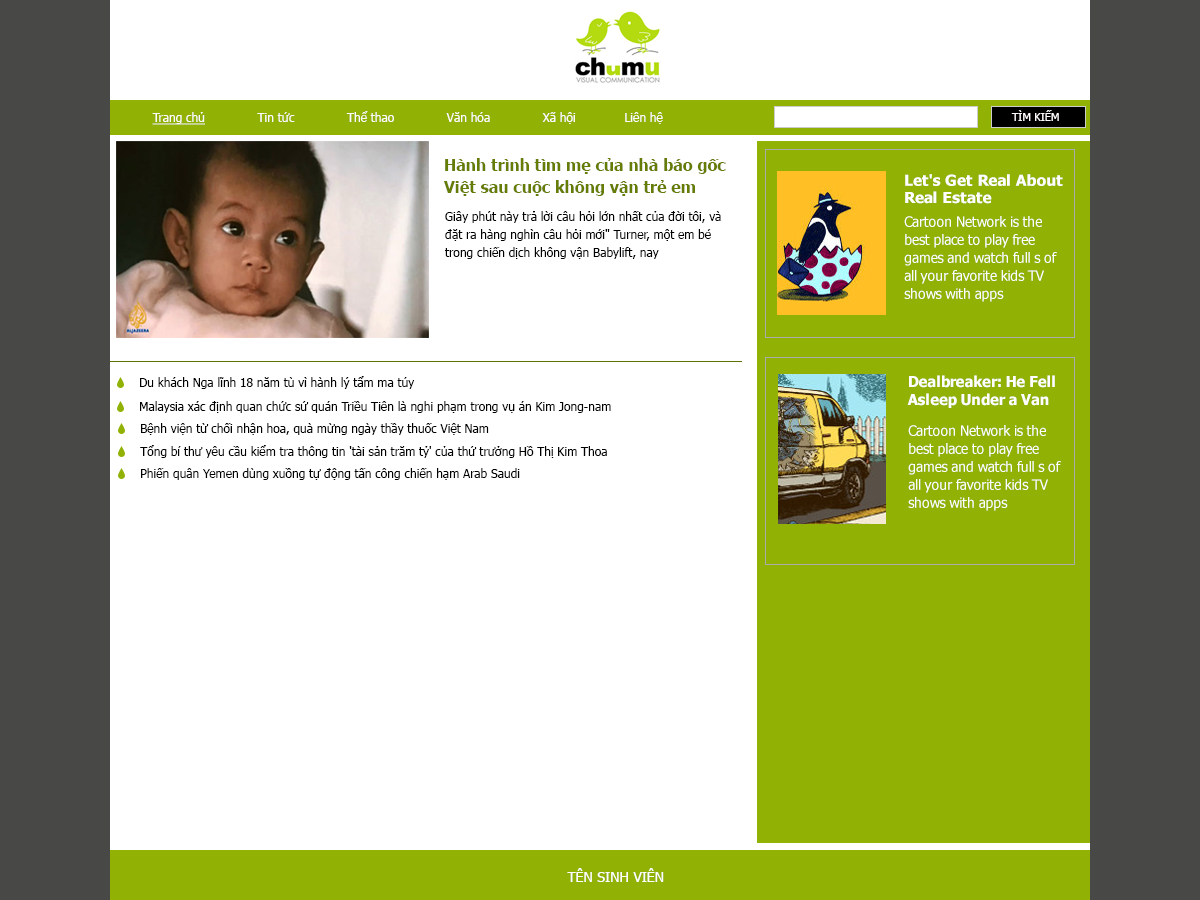
<style>
.page{position:relative;width:1200px;height:900px;background:#ffffff}
.page>*{position:absolute;margin:0}
.t1{font:12px "Tahoma";color:#fefbfb}
.t2{font:12px "Tahoma";color:#fefbfb;text-decoration:underline}
.t3{font:11px "Tahoma";color:#fefbfb}
.t4{font:16px/22px "Tahoma-Bold";color:#657c05}
.t5{font:15px/17.3px "Tahoma-Bold";letter-spacing:-0.01em;color:#ffffff;scale:1.04 1}
.t6{font:12px/18px "Tahoma";color:#000000}
.t7{font:14px/18px "Tahoma";letter-spacing:-0.01em;color:#ffffff}
.t8{font:12px "Tahoma";color:#000000}
.t9{font:15px/18.1px "Tahoma-Bold";letter-spacing:-0.01em;color:#ffffff}
.t10{font:14px "Tahoma";color:#ffffff}
</style>
<div class="page">
<p class="t1" style="left:152px;top:111px;width:511px;height:14px"><span class="t2">Trang chủ</span>              Tin tức              Thể thao              Văn hóa              Xã hội             Liên hệ</p>
<p class="t3" style="left:1011px;top:110px;width:48px;height:11px">TÌM KIẾM</p>
<p class="t4" style="left:444px;top:158px;width:282px;height:38px">Hành trình tìm mẹ của nhà báo gốc <br>Việt sau cuộc không vận trẻ em</p>
<p class="t5" style="left:905px;top:174px;width:158px;height:30px">Let's Get Real About <br>Real Estate</p>
<p class="t6" style="left:445px;top:211px;width:276px;height:48px">Giây phút này trả lời câu hỏi lớn nhất của đời tôi, và <br>đặt ra hàng nghìn câu hỏi mới" Turner, một em bé <br>trong chiến dịch không vận Babylift, nay</p>
<p class="t7" style="left:904px;top:216px;width:153px;height:86px">Cartoon Network is the <br>best place to play free <br>games and watch full s of <br>all your favorite kids TV <br>shows with apps</p>
<p class="t8" style="left:140px;top:376px;width:275px;height:13px">Du khách Nga lĩnh 18 năm tù vì hành lý tẩm ma túy</p>
<p class="t9" style="left:907px;top:375px;width:148px;height:33px">Dealbreaker: He Fell <br>Asleep Under a Van</p>
<p class="t8" style="left:140px;top:401px;width:471px;height:12px">Malaysia xác định quan chức sứ quán Triều Tiên là nghi phạm trong vụ án Kim Jong-nam</p>
<p class="t8" style="left:141px;top:423px;width:348px;height:12px">Bệnh viện từ chối nhận hoa, quà mừng ngày thầy thuốc Việt Nam</p>
<p class="t7" style="left:908px;top:425px;width:153px;height:86px">Cartoon Network is the <br>best place to play free <br>games and watch full s of <br>all your favorite kids TV <br>shows with apps</p>
<p class="t8" style="left:140px;top:445px;width:467px;height:13px">Tổng bí thư yêu cầu kiểm tra thông tin 'tài sản trăm tỷ' của thứ trưởng Hồ Thị Kim Thoa</p>
<p class="t8" style="left:141px;top:468px;width:379px;height:12px">Phiến quân Yemen dùng xuồng tự động tấn công chiến hạm Arab Saudi</p>
<p class="t10" style="left:567px;top:868px;width:97px;height:14px">TÊN SINH VIÊN</p>
</div>
